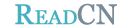
<style>
.page{position:relative;width:136px;height:28px;background:#ffffff}
.page>*{position:absolute;margin:0}
.t1{font:20px "Georgia";color:#44b1c1;font-weight:bold}
.t2{font:28px "Georgia";color:#44b1c1;font-weight:bold}
.t3{font:28px "Georgia";color:#798b97;font-weight:bold}
</style>
<div class="page">
<p class="t1" style="left:15px;top:4px;width:62px;height:21px"><span class="t2">R</span>EAD</p>
<p class="t3" style="left:77px;top:3px;width:40px;height:22px">CN</p>
</div>
